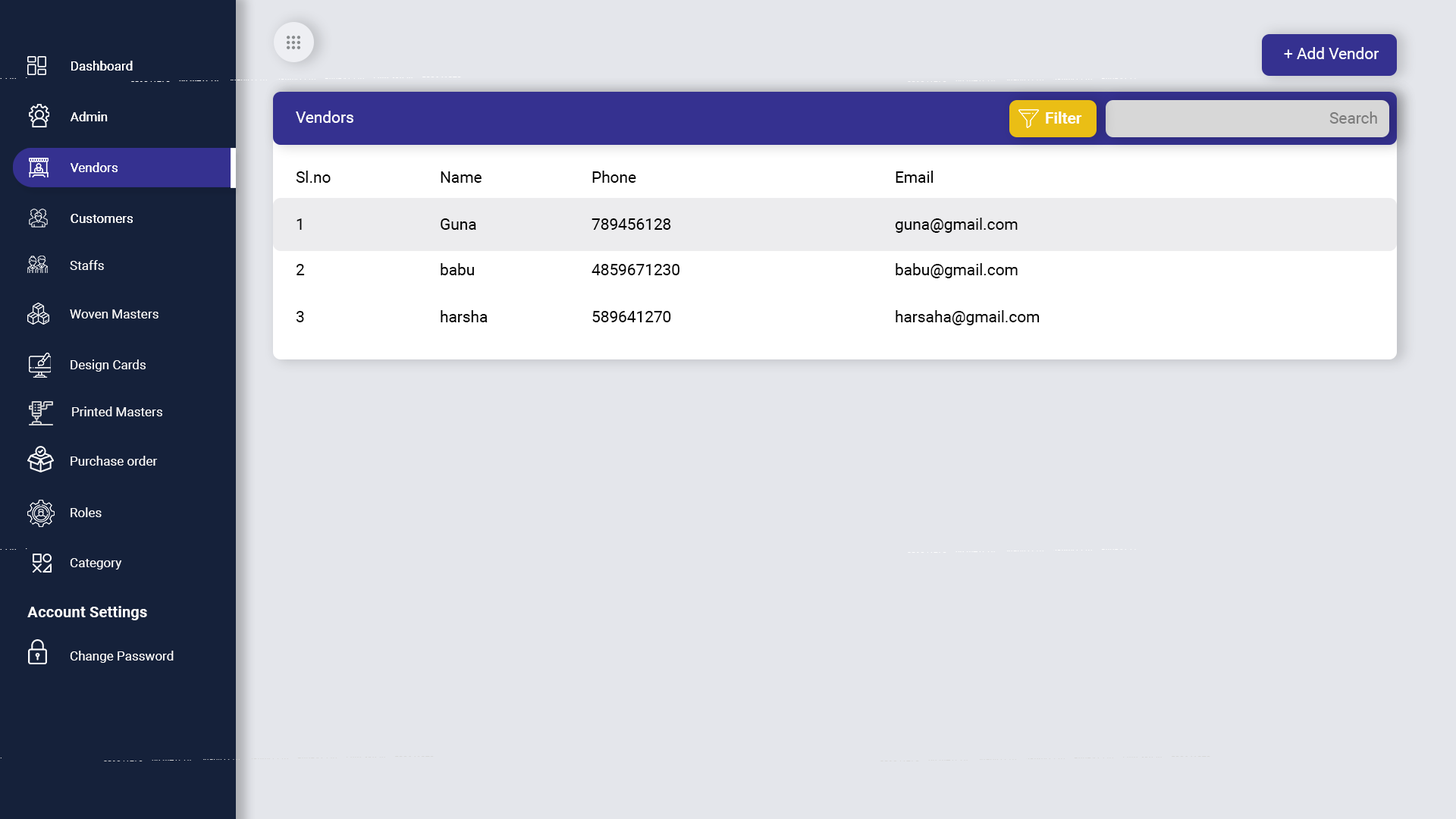
<style>
.page{position:relative;width:1456px;height:819px;background:#e4e6eb}
.page>*{position:absolute;margin:0}
.t1{font:15.8px "Roboto-Regular";color:#ffffff}
.t2{font:12.9px "Roboto-Regular";color:#ffffff}
.t3{font:15.8px "Roboto-Bold";color:#ffffff}
.t4{font:15.8px "Roboto-Regular";color:#7b7b7b}
.t5{font:15.8px "Roboto-Regular";color:#000000}
</style>
<div class="page">
<p class="t1" style="left:1284px;top:47px;width:95px;height:12px">+ Add Vendor</p>
<p class="t2" style="left:71px;top:61px;width:62px;height:10px">Dashboard</p>
<p class="t2" style="left:71px;top:61px;width:62px;height:10px">Dashboard</p>
<p class="t2" style="left:71px;top:111px;width:37px;height:10px">Admin</p>
<p class="t2" style="left:71px;top:111px;width:37px;height:10px">Admin</p>
<p class="t1" style="left:296px;top:111px;width:57px;height:12px">Vendors</p>
<p class="t3" style="left:1046px;top:111px;width:36px;height:13px">Filter</p>
<p class="t4" style="left:1329px;top:111px;width:48px;height:13px">Search</p>
<p class="t2" style="left:71px;top:162px;width:47px;height:10px">Vendors</p>
<p class="t2" style="left:71px;top:162px;width:47px;height:10px">Vendors</p>
<p class="t5" style="left:296px;top:171px;width:35px;height:12px">Sl.no</p>
<p class="t5" style="left:441px;top:171px;width:41px;height:12px">Name</p>
<p class="t5" style="left:592px;top:171px;width:44px;height:12px">Phone</p>
<p class="t5" style="left:896px;top:171px;width:37px;height:12px">Email</p>
<p class="t2" style="left:71px;top:214px;width:62px;height:9px">Customers</p>
<p class="t2" style="left:71px;top:214px;width:62px;height:9px">Customers</p>
<p class="t5" style="left:297px;top:218px;width:5px;height:12px">1</p>
<p class="t5" style="left:441px;top:218px;width:35px;height:12px">Guna</p>
<p class="t5" style="left:591px;top:218px;width:80px;height:12px">789456128</p>
<p class="t5" style="left:895px;top:218px;width:123px;height:15px">guna@gmail.com</p>
<p class="t2" style="left:70px;top:260px;width:34px;height:10px">Staffs</p>
<p class="t5" style="left:297px;top:264px;width:8px;height:11px">2</p>
<p class="t5" style="left:441px;top:263px;width:33px;height:12px">babu</p>
<p class="t5" style="left:591px;top:264px;width:88px;height:11px">4859671230</p>
<p class="t5" style="left:896px;top:263px;width:122px;height:15px">babu@gmail.com</p>
<p class="t5" style="left:296px;top:311px;width:8px;height:11px">3</p>
<p class="t5" style="left:441px;top:310px;width:47px;height:12px">harsha</p>
<p class="t5" style="left:592px;top:311px;width:79px;height:11px">589641270</p>
<p class="t5" style="left:896px;top:310px;width:144px;height:15px">harsaha@gmail.com</p>
<p class="t2" style="left:71px;top:359px;width:75px;height:13px">Design Cards</p>
</div>
